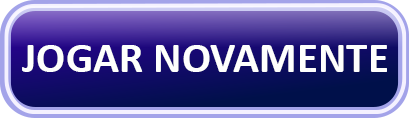
<style>
.page{position:relative;width:409px;height:118px}
.page>*{position:absolute;margin:0}
.t1{font:43.1px "Calibri-Bold";color:#fefffd}
</style>
<div class="page">
<p class="t1" style="left:22px;top:45px;width:365px;height:27px">JOGAR NOVAMENTE</p>
</div>
